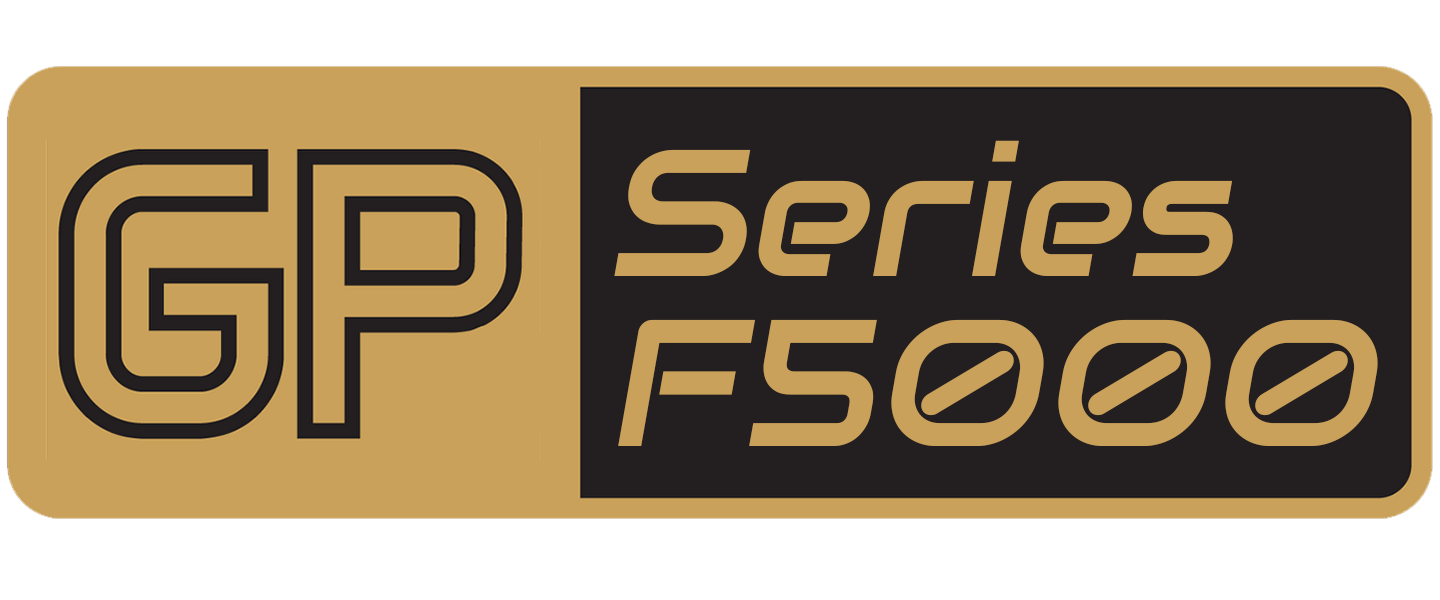
<style>
.page{position:relative;width:1440px;height:600px;background:#c9a15a}
.page>*{position:absolute;margin:0}
.t1{font:180px/170.9px "Audiowide-Regular";color:#c9a15a;font-style:italic}
</style>
<div class="page">
<p class="t1" style="left:614px;top:140px;width:764px;height:306px">Series<br>F5000</p>
</div>
